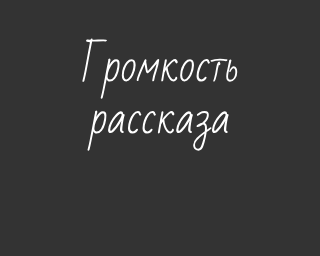
<style>
.page{position:relative;width:320px;height:256px;background:#333333}
.page>*{position:absolute;margin:0}
.t1{font:43px "BadScript-Regular";color:#ffffff}
</style>
<div class="page">
<p class="t1" style="left:82px;top:38px;width:156px;height:113px;text-align:center">Громкость<br>рассказа</p>
</div>
